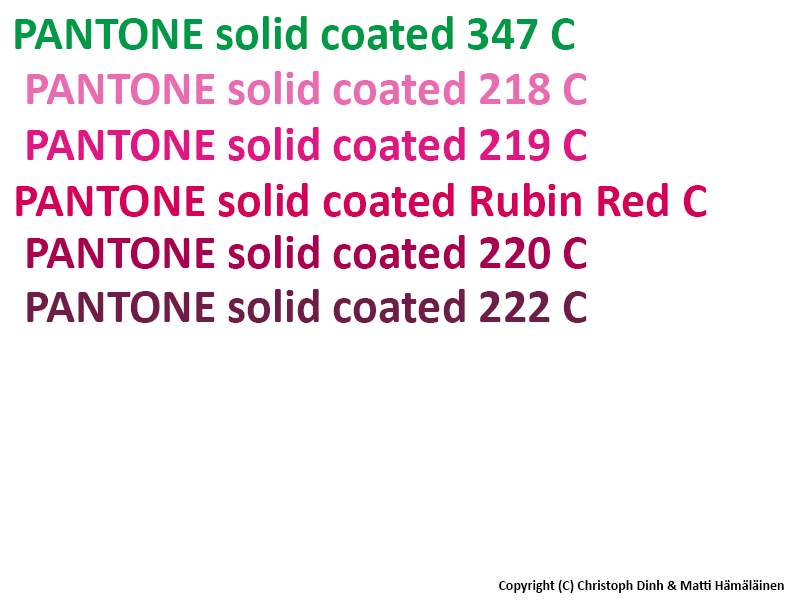
<style>
.page{position:relative;width:800px;height:600px;background:#ffffff}
.page>*{position:absolute;margin:0}
.t1{font:48px "Calibri-Bold";color:#009946}
.t2{font:48px "Calibri-Bold";color:#ea6cb0}
.t3{font:48px "Calibri-Bold";color:#e01783}
.t4{font:48px "Calibri-Bold";color:#d50058}
.t5{font:48px "Calibri-Bold";color:#aa0050}
.t6{font:48px "Calibri-Bold";color:#6f1d46}
.t7{font:14px "Calibri-Bold";color:#000000}
</style>
<div class="page">
<p class="t1" style="left:15px;top:16px;width:560px;height:34px">PANTONE solid coated 347 C</p>
<p class="t2" style="left:27px;top:71px;width:560px;height:34px">PANTONE solid coated 218 C</p>
<p class="t3" style="left:27px;top:127px;width:560px;height:34px">PANTONE solid coated 219 C</p>
<p class="t4" style="left:16px;top:183px;width:691px;height:34px">PANTONE solid coated Rubin Red C</p>
<p class="t5" style="left:27px;top:235px;width:560px;height:34px">PANTONE solid coated 220 C</p>
<p class="t6" style="left:27px;top:289px;width:560px;height:34px">PANTONE solid coated 222 C</p>
<p class="t7" style="left:499px;top:580px;width:285px;height:13px">Copyright (C) Christoph Dinh &amp; Matti Hämäläinen</p>
</div>
